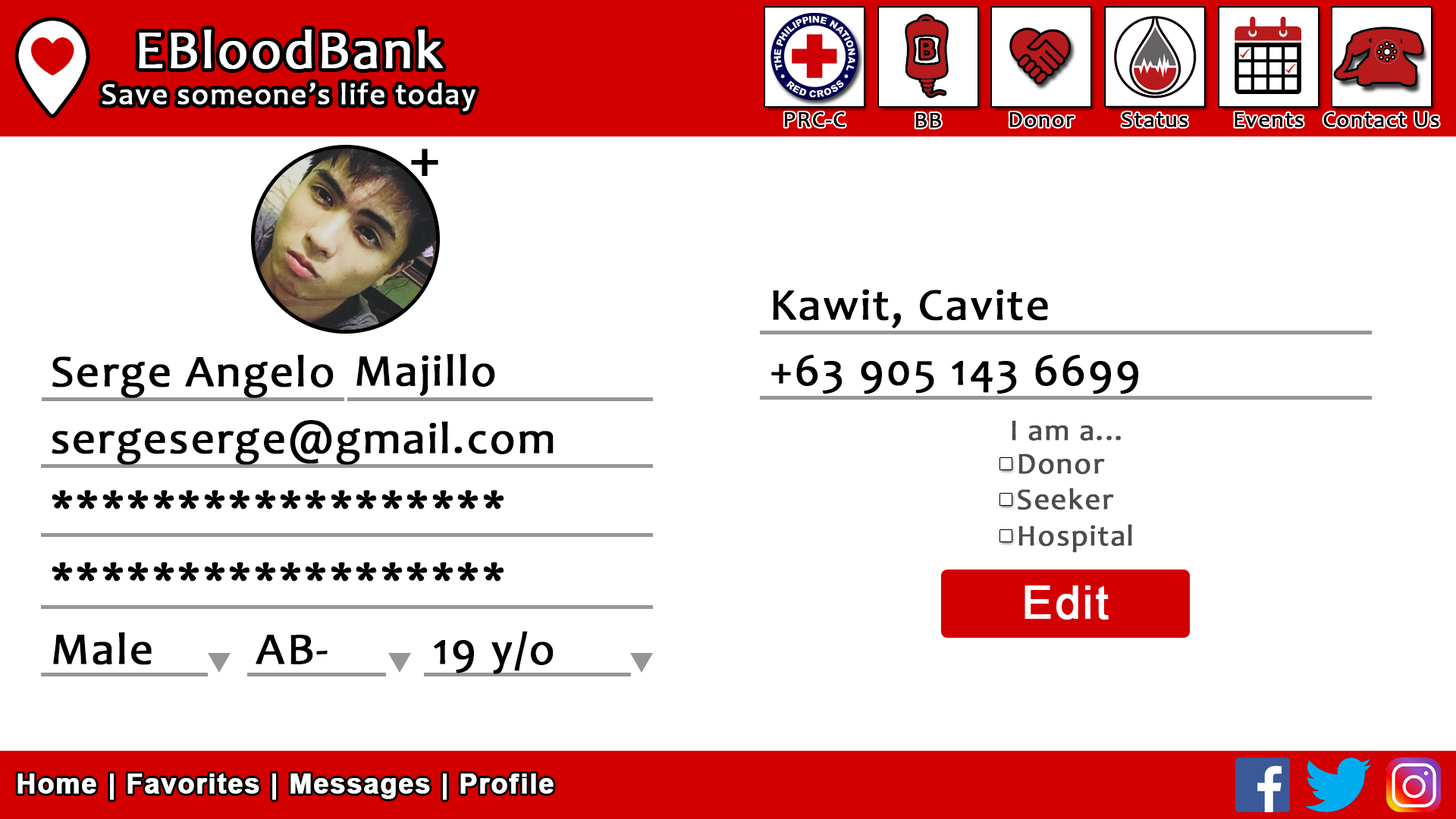
<style>
.page{position:relative;width:1456px;height:819px;background:#ffffff}
.page>*{position:absolute;margin:0}
.t1{font:30.3px "Candara";letter-spacing:0.03em;color:#ffffff;font-weight:bold}
.t2{font:54.6px "Candara";letter-spacing:0.03em;color:#ffffff;font-weight:bold}
.t3{font:22.7px "Candara";letter-spacing:0.03em;color:#000000;font-weight:bold}
.t4{font:62.9px "Candara";letter-spacing:0.03em;color:#000000;font-weight:bold}
.t5{font:45.3px "Candara";letter-spacing:0.03em;color:#000000;font-weight:bold}
.t6{font:30.2px "Candara";letter-spacing:0.03em;color:#4c4c4c;font-weight:bold}
.t7{font:45.3px "ArialMT";letter-spacing:0.03em;color:#ffffff;font-weight:bold}
.t8{font:27.3px "Arial-BoldMT";letter-spacing:0.03em;color:#ffffff;font-weight:bold}
</style>
<div class="page">
<p class="t1" style="left:102px;top:30px;width:373px;height:81px;text-align:center"><span class="t2">EBloodBank<br></span>Save someone’s life today</p>
<p class="t3" style="left:784px;top:112px;width:62px;height:15px">PRC-C</p>
<p class="t3" style="left:915px;top:113px;width:26px;height:15px">BB</p>
<p class="t3" style="left:1009px;top:112px;width:66px;height:15px">Donor</p>
<p class="t3" style="left:1122px;top:112px;width:66px;height:15px">Status</p>
<p class="t3" style="left:1235px;top:112px;width:69px;height:15px">Events</p>
<p class="t3" style="left:1323px;top:112px;width:116px;height:15px">Contact Us</p>
<p class="t4" style="left:411px;top:149px;width:27px;height:27px">+</p>
<p class="t5" style="left:773px;top:289px;width:275px;height:39px">Kawit, Cavite</p>
<p class="t5" style="left:356px;top:353px;width:139px;height:43px">Majillo</p>
<p class="t5" style="left:52px;top:354px;width:282px;height:44px">Serge Angelo</p>
<p class="t5" style="left:771px;top:354px;width:367px;height:40px">+63 905 143 6699</p>
<p class="t5" style="left:52px;top:420px;width:502px;height:45px">sergeserge@gmail.com</p>
<p class="t6" style="left:1012px;top:420px;width:109px;height:21px">I am a...</p>
<p class="t6" style="left:1018px;top:453px;width:114px;height:100px">Donor<br>Seeker<br>Hospital</p>
<p class="t5" style="left:52px;top:490px;width:452px;height:20px">******************</p>
<p class="t5" style="left:52px;top:562px;width:452px;height:20px">******************</p>
<p class="t7" style="left:1024px;top:585px;width:85px;height:35px">Edit</p>
<p class="t5" style="left:53px;top:632px;width:99px;height:33px">Male</p>
<p class="t5" style="left:256px;top:635px;width:72px;height:29px">AB-</p>
<p class="t5" style="left:434px;top:631px;width:120px;height:43px">19 y/o</p>
<p class="t8" style="left:17px;top:773px;width:537px;height:27px">Home | Favorites | Messages | Profile</p>
</div>
